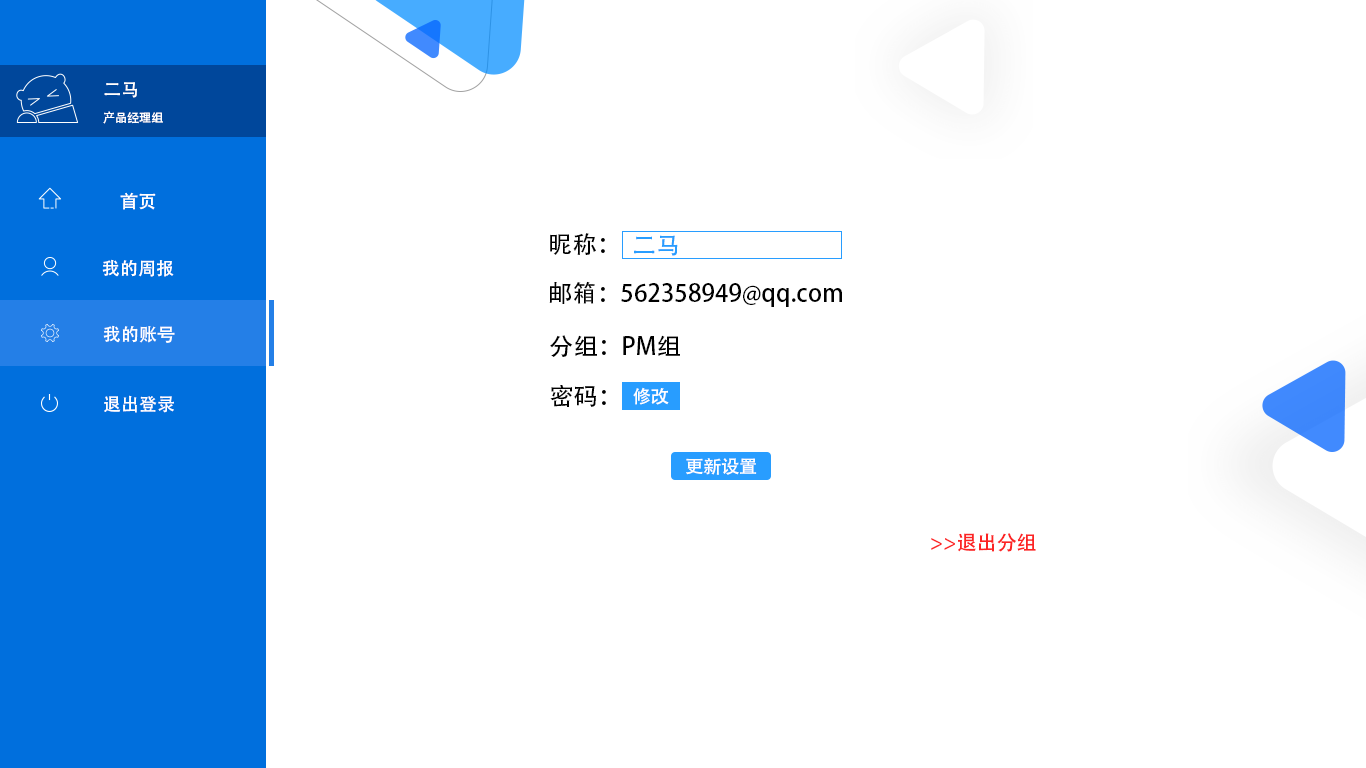
<style>
.page{position:relative;width:1366px;height:768px;background:#ffffff}
.page>*{position:absolute;margin:0}
.t1{font:18px "AdobeHeitiStd-Regular";color:#ffffff}
.t2{font:12px "AdobeHeitiStd-Regular";color:#ffffff}
.t3{font:24px "AdobeHeitiStd-Regular";color:#000000}
.t4{font:24px "AdobeHeitiStd-Regular";color:#289dff}
.t5{font:18px "AdobeHeitiStd-Regular";color:#fffefe}
.t6{font:20px "AdobeHeitiStd-Regular";color:#fc2424}
</style>
<div class="page">
<p class="t1" style="left:104px;top:82px;width:33px;height:16px">二马</p>
<p class="t2" style="left:103px;top:111px;width:60px;height:13px">产品经理组</p>
<p class="t1" style="left:120px;top:192px;width:36px;height:18px">首页</p>
<p class="t3" style="left:550px;top:233px;width:55px;height:22px">昵称：</p>
<p class="t4" style="left:634px;top:235px;width:44px;height:21px">二马</p>
<p class="t1" style="left:102px;top:259px;width:72px;height:18px">我的周报</p>
<p class="t3" style="left:549px;top:281px;width:293px;height:26px">邮箱：562358949@qq.com</p>
<p class="t1" style="left:103px;top:325px;width:72px;height:18px">我的账号</p>
<p class="t3" style="left:550px;top:335px;width:130px;height:22px">分组：PM组</p>
<p class="t3" style="left:550px;top:385px;width:56px;height:22px">密码：</p>
<p class="t1" style="left:633px;top:387px;width:36px;height:18px">修改</p>
<p class="t1" style="left:104px;top:395px;width:70px;height:18px">退出登录</p>
<p class="t5" style="left:686px;top:458px;width:71px;height:17px">更新设置</p>
<p class="t6" style="left:931px;top:533px;width:105px;height:19px">&gt;&gt;退出分组</p>
</div>
